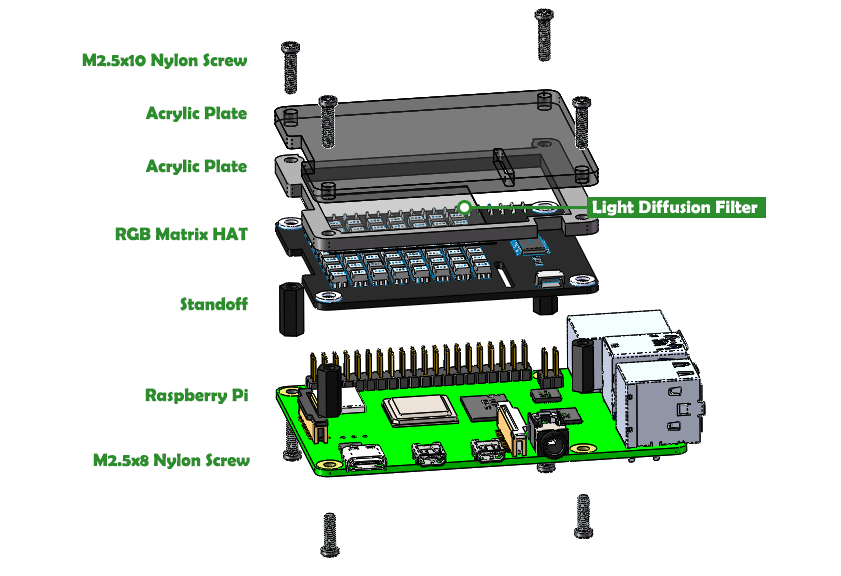
<style>
.page{position:relative;width:841px;height:576px;background:#ffffff}
.page>*{position:absolute;margin:0}
.t1{font:18px "BerlinSansFBDemi-Bold";color:#2b8d2b}
.t2{font:18px "BerlinSansFBDemi-Bold";color:#ffffff}
</style>
<div class="page">
<p class="t1" style="left:82px;top:53px;width:165px;height:16px">M2.5x10 Nylon Screw</p>
<p class="t1" style="left:145px;top:106px;width:102px;height:16px">Acrylic Plate</p>
<p class="t1" style="left:145px;top:159px;width:102px;height:16px">Acrylic Plate</p>
<p class="t2" style="left:592px;top:200px;width:166px;height:16px">Light Diffusion Filter</p>
<p class="t1" style="left:115px;top:227px;width:133px;height:14px">RGB Matrix HAT</p>
<p class="t1" style="left:180px;top:297px;width:68px;height:14px">Standoff</p>
<p class="t1" style="left:145px;top:388px;width:103px;height:16px">Raspberry Pi</p>
<p class="t1" style="left:93px;top:453px;width:157px;height:16px">M2.5x8 Nylon Screw</p>
</div>
